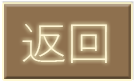
<style>
.page{position:relative;width:134px;height:82px;background:#8e704e}
.page>*{position:absolute;margin:0}
.t1{font:45.8px "YuGothicUI-Light";color:#fff5d3}
</style>
<div class="page">
<p class="t1" style="left:22px;top:24px;width:85px;height:39px">返回</p>
</div>
